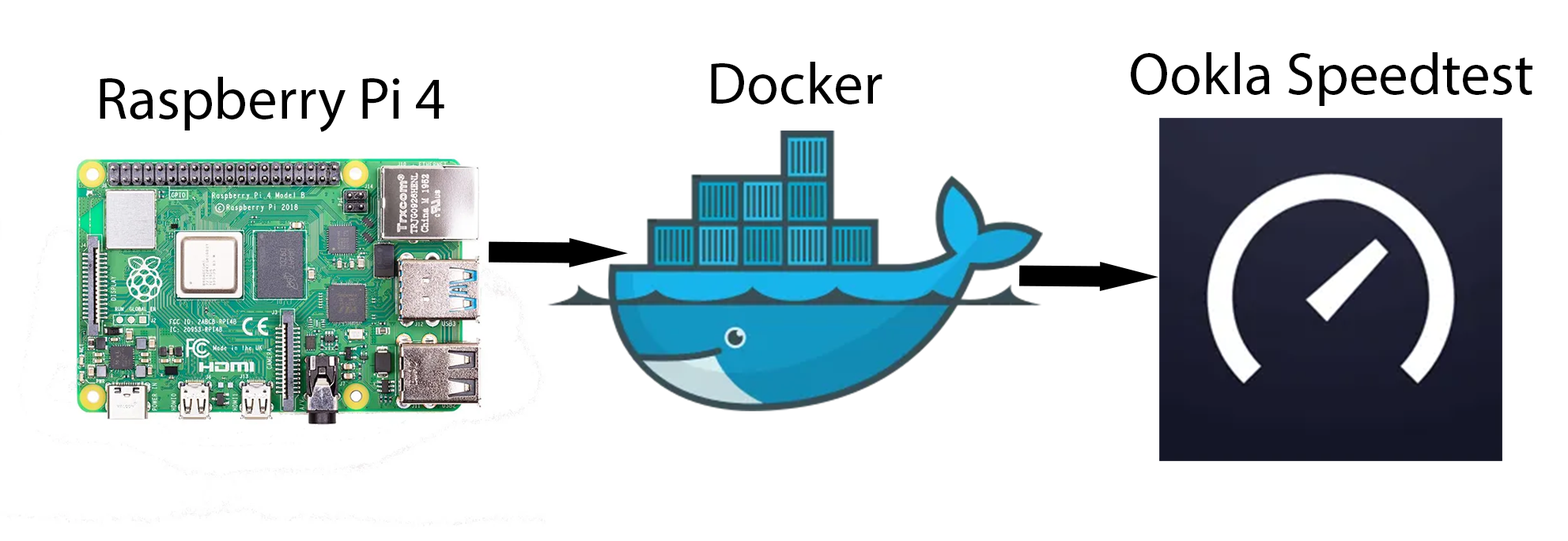
<style>
.page{position:relative;width:1568px;height:541px;background:#ffffff}
.page>*{position:absolute;margin:0}
.t1{font:59.3px "MyriadPro-Regular";color:#000000}
</style>
<div class="page">
<p class="t1" style="left:1131px;top:52px;width:401px;height:54px">Ookla Speedtest</p>
<p class="t1" style="left:711px;top:62px;width:171px;height:42px">Docker</p>
<p class="t1" style="left:100px;top:77px;width:344px;height:55px">Raspberry Pi 4</p>
</div>
